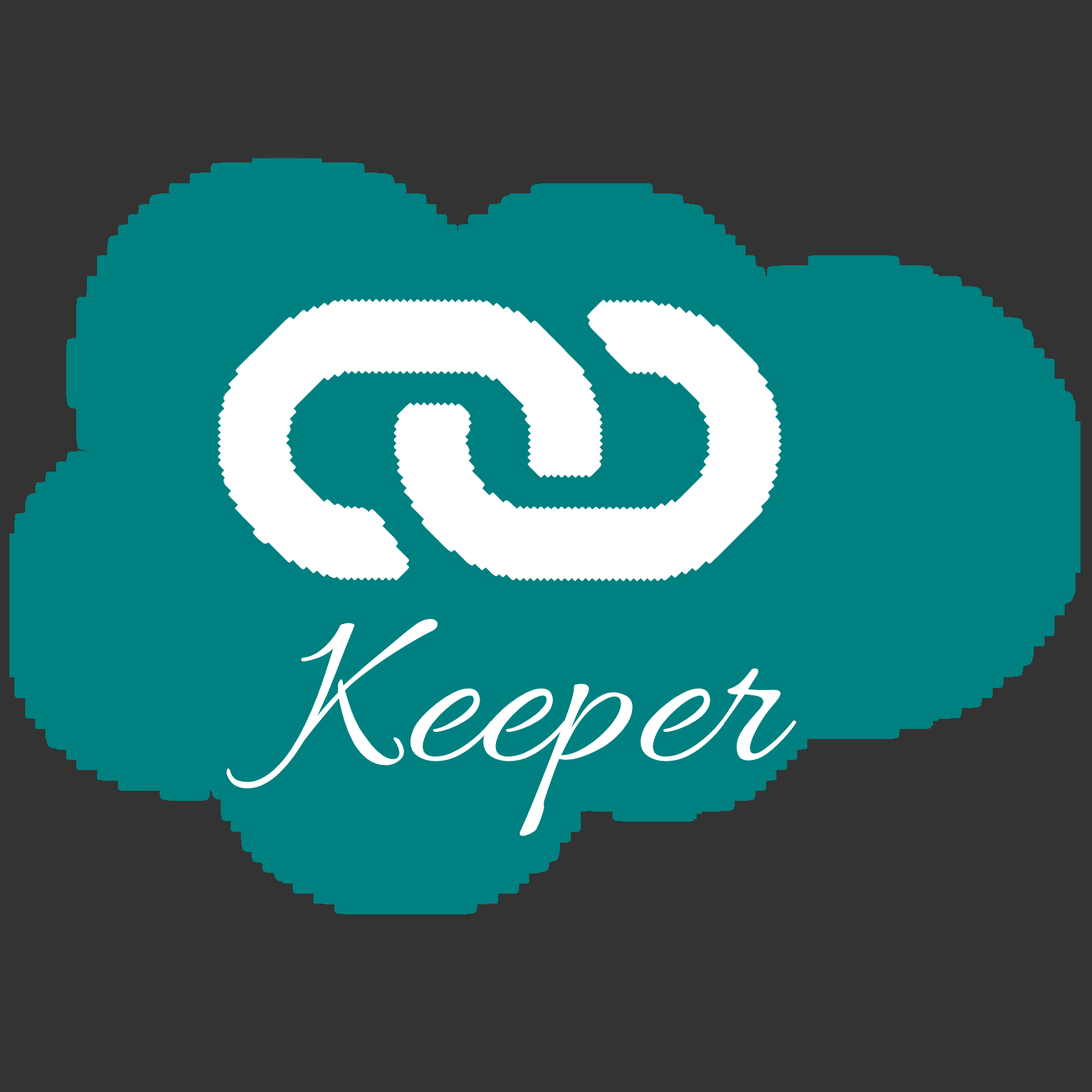
<style>
.page{position:relative;width:1092px;height:1092px;background:#333333}
.page>*{position:absolute;margin:0}
.t1{font:228.6px "Allura-Regular";color:#ffffff}
</style>
<div class="page">
<p class="t1" style="left:226px;top:619px;width:571px;height:217px">Keeper</p>
</div>
